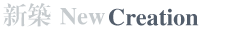
<style>
.page{position:relative;width:250px;height:30px;background:#ffffff}
.page>*{position:absolute;margin:0}
.t1{font:24px "CTBiaoSongSF";color:#c6cbce}
.t2{font:24px "CTBiaoSongSF";color:#525d6b}
</style>
<div class="page">
<p class="t1" style="left:3px;top:3px;width:48px;height:24px">新筑</p>
<p class="t1" style="left:60px;top:8px;width:45px;height:17px">New</p>
<p class="t2" style="left:109px;top:8px;width:90px;height:18px">Creation</p>
</div>
